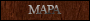
<style>
.page{position:relative;width:90px;height:21px}
.page>*{position:absolute;margin:0}
.t1{font:13px "TimesNewRomanPSMT";letter-spacing:-0.1em}
</style>
<div class="page">
<p class="t1" style="left:28px;top:5px;width:34px;height:9px">MAPA</p>
</div>
